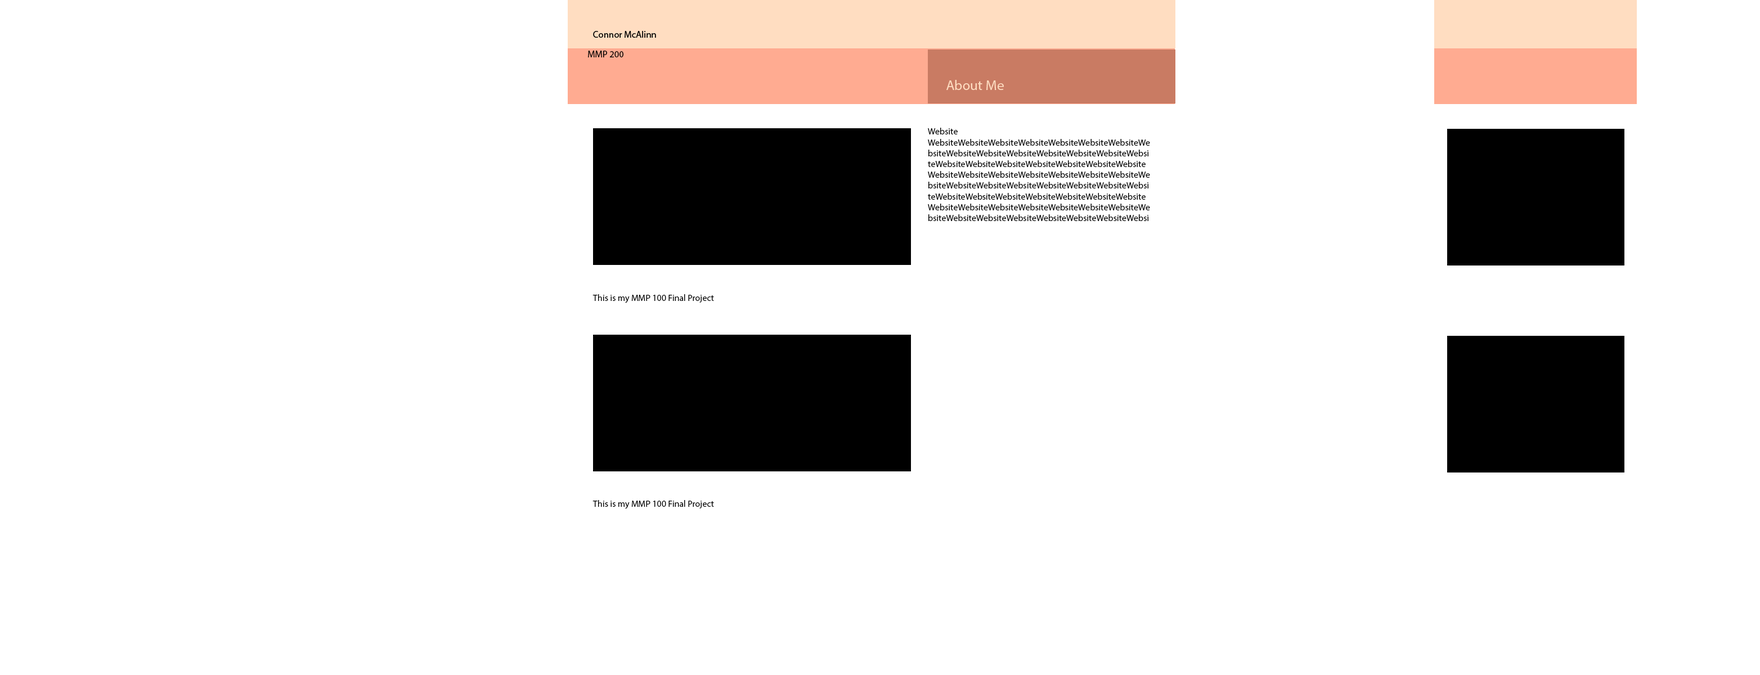
<style>
.page{position:relative;width:1760px;height:675px;background:#ffffff}
.page>*{position:absolute;margin:0}
.t1{font:9.4px "MyriadPro-Regular";color:#000000}
.t2{font:14.1px "MyriadPro-Regular";color:#ffddc1}
.t3{font:9px "MyriadPro-Regular";color:#000000}
</style>
<div class="page">
<p class="t1" style="left:588px;top:51px;width:35px;height:6px">MMP 200</p>
<p class="t2" style="left:946px;top:80px;width:58px;height:10px">About Me</p>
<p class="t3" style="left:928px;top:128px;width:222px;height:93px">Website WebsiteWebsiteWebsiteWebsiteWebsiteWebsiteWebsiteWebsiteWebsiteWebsiteWebsiteWebsiteWebsiteWebsiteWebsiteWebsiteWebsiteWebsiteWebsiteWebsiteWebsiteWebsiteWebsiteWebsiteWebsiteWebsiteWebsiteWebsiteWebsiteWebsiteWebsiteWebsiteWebsiteWebsiteWebsiteWebsiteWebsiteWebsiteWebsiteWebsiteWebsiteWebsiteWebsiteWebsiteWebsiteWebsiteWebsiteWebsiteWebsiteWebsiteWebsiteWebsiteWebsiteWebsiteWebsiteWebsiteWebsiteWebsiteWebsiteWebsite</p>
<p class="t3" style="left:592px;top:294px;width:122px;height:9px">This is my MMP 100 Final Project</p>
<p class="t3" style="left:592px;top:500px;width:122px;height:9px">This is my MMP 100 Final Project</p>
</div>
